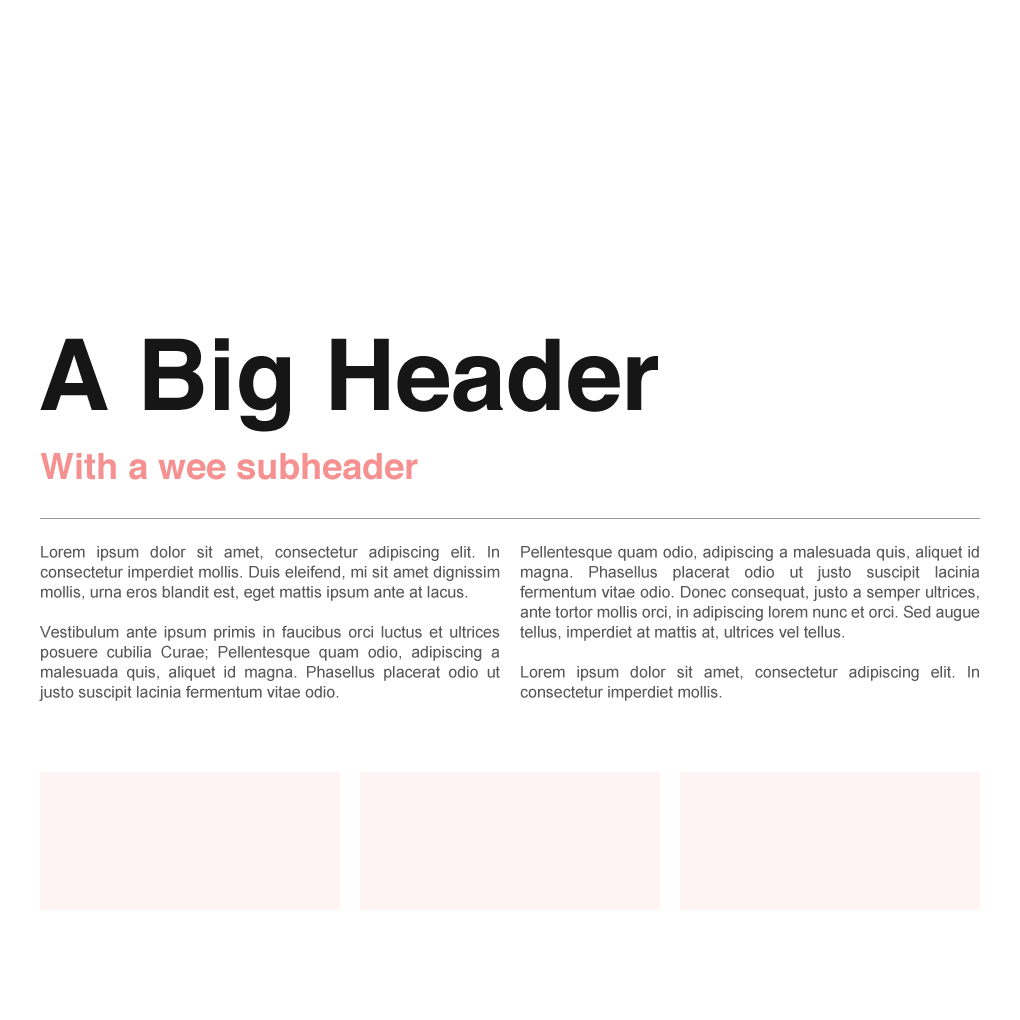
<style>
.page{position:relative;width:1020px;height:1020px;background:#ffffff}
.page>*{position:absolute;margin:0}
.t1{font:99px "Helvetica-Bold";color:#161616}
.t2{font:36px "Helvetica-Bold";color:#f69191}
.t3{font:16px/20px "ArialMT";color:#575757}
</style>
<div class="page">
<p class="t1" style="left:40px;top:338px;width:618px;height:94px">A Big Header</p>
<p class="t2" style="left:40px;top:453px;width:378px;height:27px">With a wee subheader</p>
<p class="t3" style="left:39px;top:546px;width:461px;height:155px;text-align:justify">Lorem ipsum dolor sit amet, consectetur adipiscing elit. In consectetur imperdiet mollis. Duis eleifend, mi sit amet dignissim mollis, urna eros blandit est, eget mattis ipsum ante at lacus. <br><br>Vestibulum ante ipsum primis in faucibus orci luctus et ultrices posuere cubilia Curae; Pellentesque quam odio, adipiscing a malesuada quis, aliquet id magna. Phasellus placerat odio ut justo suscipit lacinia fermentum vitae odio.</p>
<p class="t3" style="left:520px;top:546px;width:460px;height:155px;text-align:justify">Pellentesque quam odio, adipiscing a malesuada quis, aliquet id magna. Phasellus placerat odio ut justo suscipit lacinia fermentum vitae odio. Donec consequat, justo a semper ultrices, ante tortor mollis orci, in adipiscing lorem nunc et orci. Sed augue tellus, imperdiet at mattis at, ultrices vel tellus.<br><br>Lorem ipsum dolor sit amet, consectetur adipiscing elit. In consectetur imperdiet mollis.</p>
</div>
